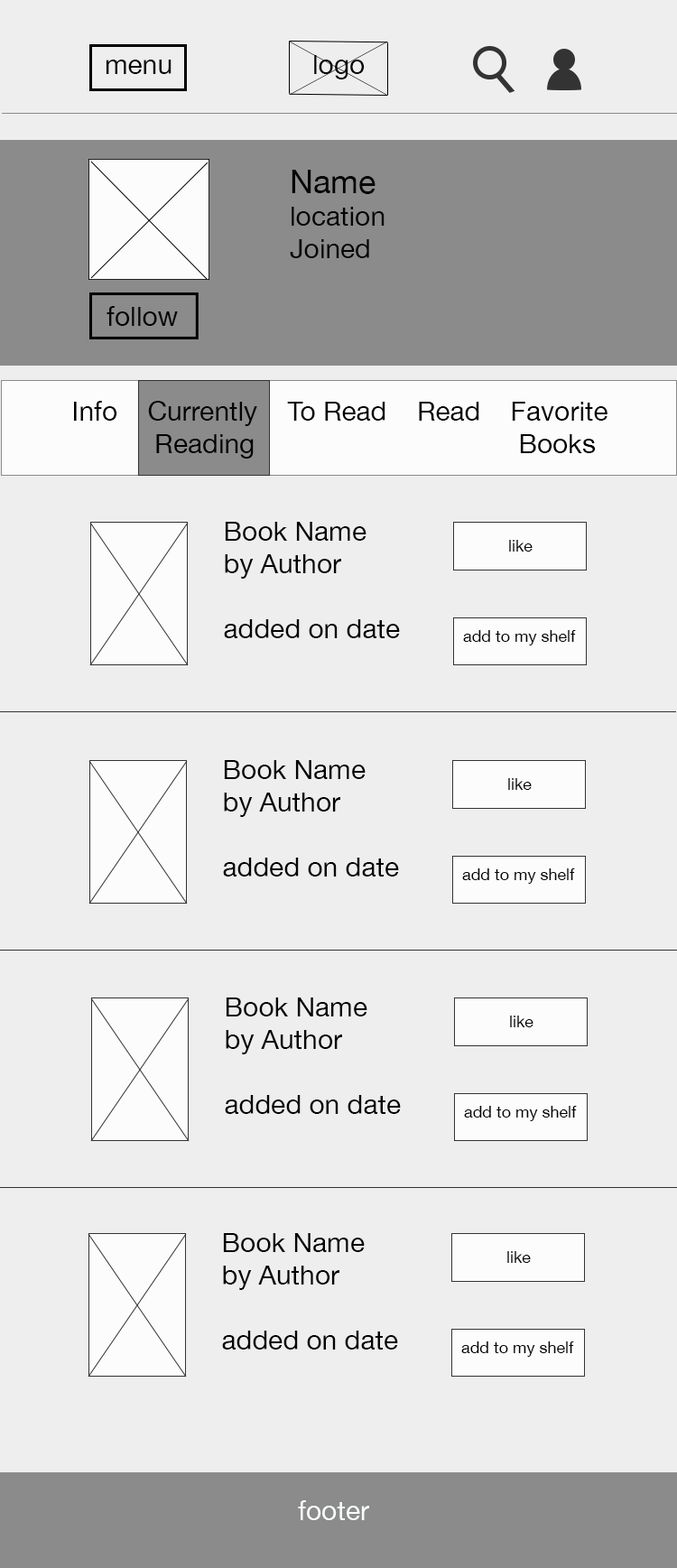
<style>
.page{position:relative;width:677px;height:1568px;background:#eeeeee}
.page>*{position:absolute;margin:0}
.t1{font:27.1px "HelveticaNeue";color:#050505}
.t2{font:32.5px "HelveticaNeue";color:#050505}
.t3{font:27.1px "HelveticaNeue";color:#030303}
.t4{font:16.2px "HelveticaNeue";color:#030303}
.t5{font:27.1px "HelveticaNeue";color:#f9fcfe}
</style>
<div class="page">
<p class="t1" style="left:106px;top:60px;width:66px;height:14px">menu</p>
<p class="t1" style="left:314px;top:55px;width:51px;height:24px">logo</p>
<p class="t1" style="left:290px;top:170px;width:95px;height:88px"><span class="t2">Name<br></span>location<br>Joined</p>
<p class="t1" style="left:107px;top:306px;width:71px;height:20px">follow</p>
<p class="t3" style="left:74px;top:401px;width:534px;height:58px">Info    Currently    To Read    Read    Favorite<br>           Reading                                   Books</p>
<p class="t3" style="left:224px;top:522px;width:176px;height:116px">Book Name<br>by Author<br><br>added on date</p>
<p class="t4" style="left:509px;top:540px;width:24px;height:12px">like</p>
<p class="t4" style="left:463px;top:630px;width:113px;height:15px">add to my shelf</p>
<p class="t3" style="left:223px;top:760px;width:176px;height:117px">Book Name<br>by Author<br><br>added on date</p>
<p class="t4" style="left:508px;top:778px;width:24px;height:12px">like</p>
<p class="t4" style="left:462px;top:868px;width:113px;height:16px">add to my shelf</p>
<p class="t3" style="left:225px;top:997px;width:176px;height:117px">Book Name<br>by Author<br><br>added on date</p>
<p class="t4" style="left:510px;top:1016px;width:23px;height:11px">like</p>
<p class="t4" style="left:464px;top:1106px;width:113px;height:15px">add to my shelf</p>
<p class="t3" style="left:222px;top:1233px;width:176px;height:117px">Book Name<br>by Author<br><br>added on date</p>
<p class="t4" style="left:507px;top:1251px;width:24px;height:12px">like</p>
<p class="t4" style="left:461px;top:1341px;width:113px;height:16px">add to my shelf</p>
<p class="t5" style="left:298px;top:1500px;width:71px;height:20px">footer</p>
</div>
